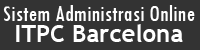
<style>
.page{position:relative;width:200px;height:50px;background:#333333}
.page>*{position:absolute;margin:0}
.t1{font:24px "TwCenMT-Condensed";color:#ffffff}
.t2{font:24px "TrebuchetMS-Bold";color:#ffffff}
</style>
<div class="page">
<p class="t1" style="left:3px;top:5px;width:192px;height:16px">Sistem Administrasi Online</p>
<p class="t2" style="left:16px;top:24px;width:167px;height:18px">ITPC Barcelona</p>
</div>
